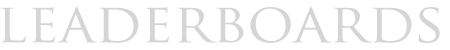
<style>
.page{position:relative;width:450px;height:50px;background:#ffffff}
.page>*{position:absolute;margin:0}
.t1{font:53.9px "TrajanPro-Regular";color:#d5d5d5;scale:1.07 1}
</style>
<div class="page">
<p class="t1" style="left:0px;top:6px;width:440px;height:37px">leaderboards</p>
</div>
